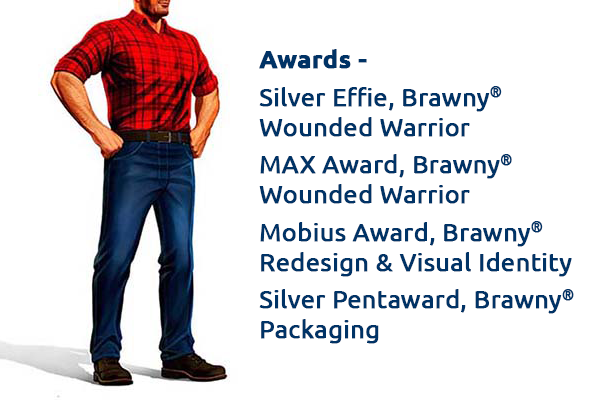
<style>
.page{position:relative;width:600px;height:400px;background:#ffffff}
.page>*{position:absolute;margin:0}
.t1{font:25px "Ubuntu";color:#003366;font-weight:bold}
.t2{font:25px "Ubuntu-Bold";color:#003366;font-weight:bold}
.t3{font:25px/37.5px "Ubuntu";color:#003366;font-weight:bold}
</style>
<div class="page">
<p class="t1" style="left:259px;top:49px;width:315px;height:295px"><span class="t2">Awards -<br></span><span class="t3">Silver Effie, Brawny®<br></span>Wounded Warrior<br><span class="t3">MAX Award, Brawny®<br></span>Wounded Warrior<br><span class="t3">Mobius Award, Brawny®<br></span>Redesign &amp; Visual Identity<br><span class="t3">Silver Pentaward, Brawny®<br></span>Packaging</p>
</div>
